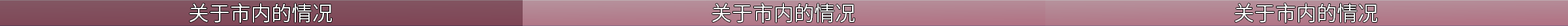
<style>
.page{position:relative;width:1568px;height:26px}
.page>*{position:absolute;margin:0}
.t1{font:20.6px "SourceHanSansSC-Normal";color:#ffffff}
</style>
<div class="page">
<p class="t1" style="left:189px;top:3px;width:143px;height:20px">关于市内的情况</p>
<p class="t1" style="left:712px;top:3px;width:143px;height:20px">关于市内的情况</p>
<p class="t1" style="left:1235px;top:3px;width:142px;height:20px">关于市内的情况</p>
</div>
